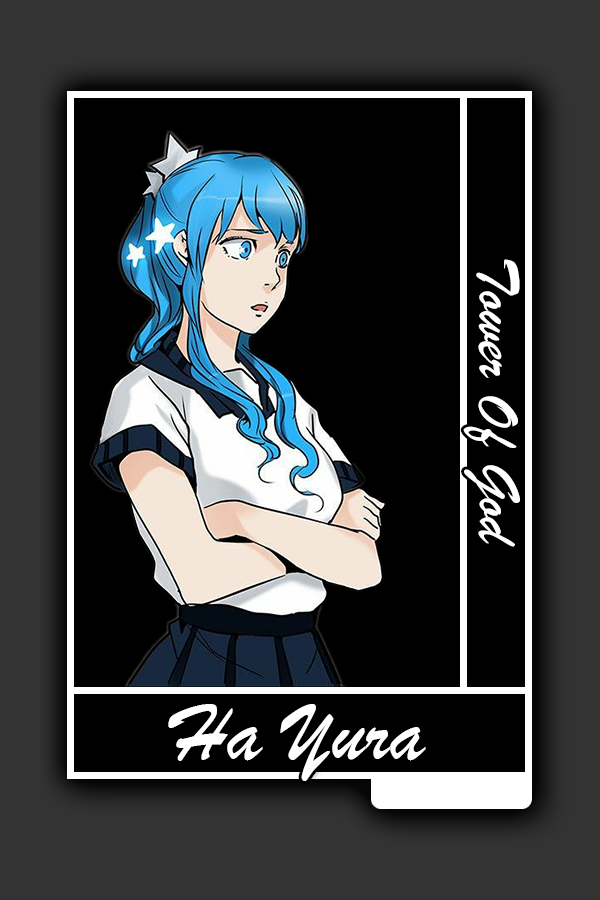
<style>
.page{position:relative;width:600px;height:900px;background:#000000}
.page>*{position:absolute;margin:0}
.t1{font:61.5px "BrushScriptMT";color:#ffffff}
.t2{font:84.8px "BrushScriptMT";color:#ffffff}
</style>
<div class="page">
<p class="t1" style="left:463px;top:259px;width:57px;height:288px;rotate:90deg">Tower Of God</p>
<p class="t2" style="left:168px;top:704px;width:258px;height:77px">Ha Yura</p>
</div>
